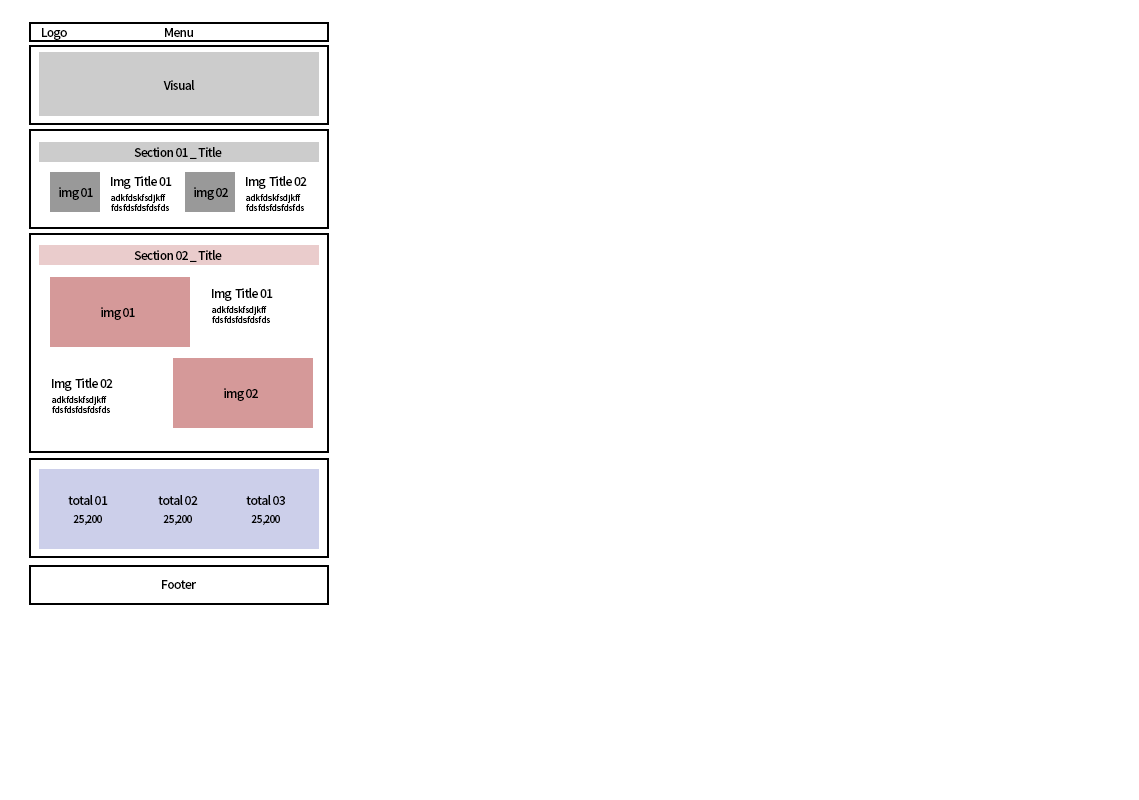
<style>
.page{position:relative;width:1139px;height:800px;background:#ffffff}
.page>*{position:absolute;margin:0}
.t1{font:12px "NotoSansKR-Medium";letter-spacing:-0.05em;color:#000000}
.t2{font:8px/10px "NotoSansKR-Medium";color:#000000}
.t3{font:12px/18px "NotoSansKR-Medium";letter-spacing:-0.05em;color:#000000}
.t4{font:10px/18px "NotoSansKR-Medium";letter-spacing:-0.05em;color:#000000}
</style>
<div class="page">
<p class="t1" style="left:42px;top:28px;width:25px;height:12px">Logo</p>
<p class="t1" style="left:165px;top:28px;width:28px;height:9px">Menu</p>
<p class="t1" style="left:163px;top:80px;width:32px;height:10px">Visual</p>
<p class="t1" style="left:134px;top:147px;width:88px;height:12px">Section 01 _ Title</p>
<p class="t1" style="left:111px;top:176px;width:61px;height:13px">Img  Title 01</p>
<p class="t1" style="left:246px;top:176px;width:61px;height:13px">Img  Title 02</p>
<p class="t1" style="left:59px;top:187px;width:34px;height:13px">img 01</p>
<p class="t2" style="left:111px;top:194px;width:58px;height:17px">adkfdskfsdjkff<br>fdsfdsfdsfdsfds</p>
<p class="t1" style="left:194px;top:187px;width:34px;height:13px">img 02</p>
<p class="t2" style="left:246px;top:194px;width:58px;height:17px">adkfdskfsdjkff<br>fdsfdsfdsfdsfds</p>
<p class="t1" style="left:134px;top:250px;width:88px;height:12px">Section 02 _ Title</p>
<p class="t1" style="left:212px;top:288px;width:61px;height:13px">Img  Title 01</p>
<p class="t1" style="left:101px;top:307px;width:34px;height:13px">img 01</p>
<p class="t2" style="left:212px;top:306px;width:58px;height:17px">adkfdskfsdjkff<br>fdsfdsfdsfdsfds</p>
<p class="t1" style="left:52px;top:378px;width:61px;height:13px">Img  Title 02</p>
<p class="t1" style="left:224px;top:388px;width:34px;height:13px">img 02</p>
<p class="t2" style="left:52px;top:396px;width:58px;height:17px">adkfdskfsdjkff<br>fdsfdsfdsfdsfds</p>
<p class="t3" style="left:68px;top:495px;width:40px;height:30px;text-align:center">total 01<br><span class="t4">25,200</span></p>
<p class="t3" style="left:158px;top:495px;width:40px;height:30px;text-align:center">total 02<br><span class="t4">25,200</span></p>
<p class="t3" style="left:246px;top:495px;width:39px;height:30px;text-align:center">total 03<br><span class="t4">25,200</span></p>
<p class="t1" style="left:162px;top:580px;width:34px;height:9px">Footer</p>
</div>
